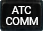
<style>
.page{position:relative;width:43px;height:31px}
.page>*{position:absolute;margin:0}
.t1{font:10.7px "Roboto-Regular";color:#ffffff}
</style>
<div class="page">
<p class="t1" style="left:11px;top:6px;width:20px;height:8px">ATC</p>
<p class="t1" style="left:6px;top:17px;width:32px;height:8px">COMM</p>
</div>
